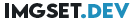
<style>
.page{position:relative;width:135px;height:22px;background:#ffffff}
.page>*{position:absolute;margin:0}
.t1{font:18px "LEMONMILKProFTR-Bold";color:#1a1e21;scale:1.05 1}
.t2{font:18px "LEMONMILKProFTR-Bold";color:#208fbc;scale:1.05 1}
</style>
<div class="page">
<p class="t1" style="left:5px;top:3px;width:125px;height:16px">IMGSET<span class="t2">.DEV</span></p>
</div>
